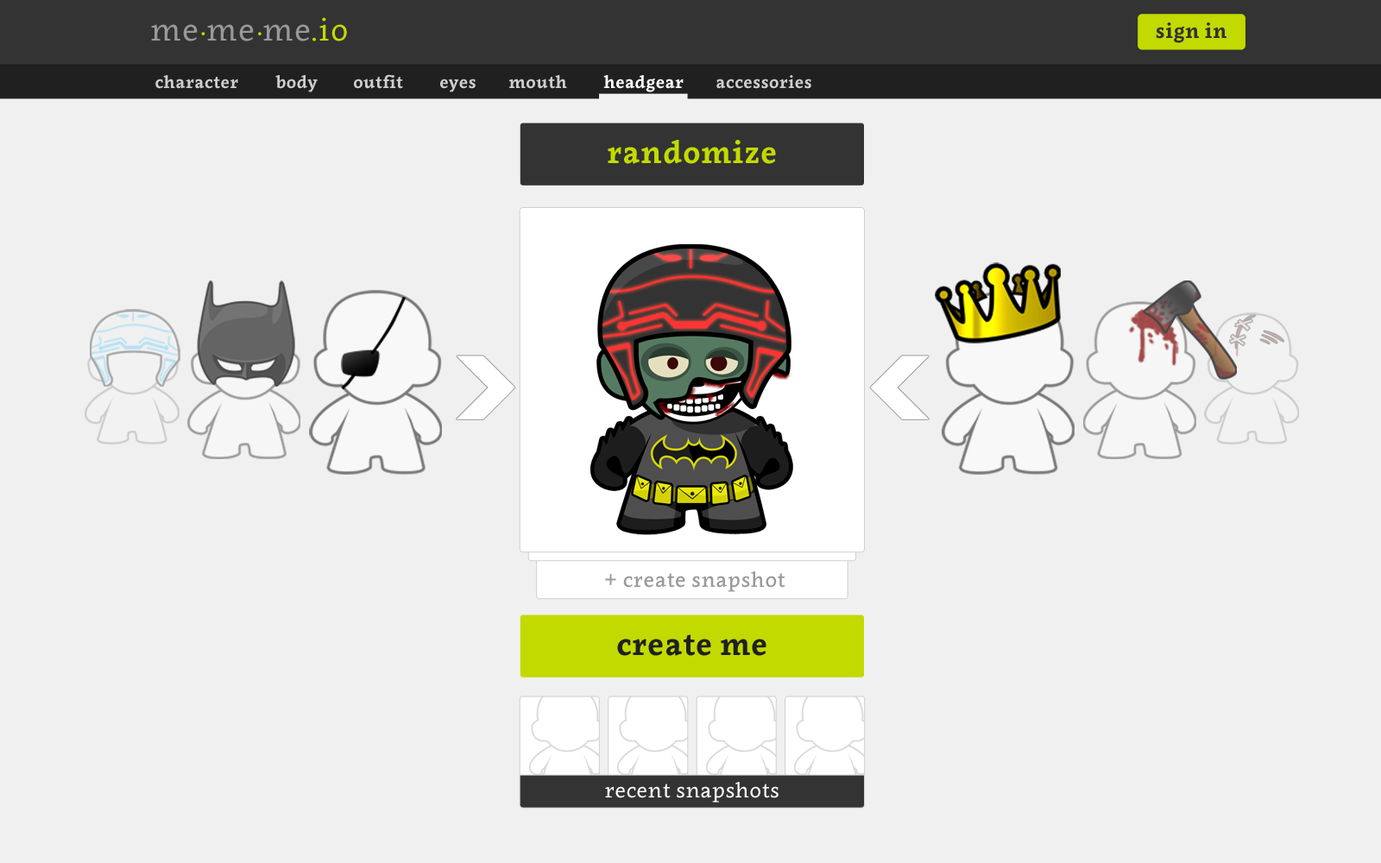
<style>
.page{position:relative;width:1381px;height:863px;background:#f0f0f0}
.page>*{position:absolute;margin:0}
.t1{font:31.1px "Clavo-Regular";letter-spacing:0.02em;color:#999999}
.t2{font:31.1px "Clavo-Regular";letter-spacing:0.02em;color:#c2da00}
.t3{font:20.7px "Clavo-Bold";letter-spacing:0.02em;color:#333333}
.t4{font:17.3px "Clavo-Bold";letter-spacing:0.02em;color:#cfcfcf}
.t5{font:17.3px "Clavo-Bold";letter-spacing:0.02em;color:#ffffff}
.t6{font:31.1px "Clavo-Bold";letter-spacing:0.02em;color:#c2da00}
.t7{font:20.7px "Clavo-Medium";letter-spacing:0.02em;color:#999999}
.t8{font:31.1px "Clavo-Bold";letter-spacing:0.02em;color:#202020}
.t9{font:20.7px "Clavo-Regular";letter-spacing:0.02em;color:#ffffff}
</style>
<div class="page">
<p class="t1" style="left:151px;top:17px;width:196px;height:24px">me me me<span class="t2">.io</span></p>
<p class="t3" style="left:1156px;top:22px;width:71px;height:21px">sign in</p>
<p class="t4" style="left:155px;top:75px;width:83px;height:14px">character</p>
<p class="t4" style="left:275px;top:75px;width:43px;height:17px">body</p>
<p class="t4" style="left:354px;top:74px;width:49px;height:15px">outfit</p>
<p class="t4" style="left:509px;top:75px;width:58px;height:14px">mouth</p>
<p class="t5" style="left:603px;top:75px;width:81px;height:17px">headgear</p>
<p class="t4" style="left:717px;top:75px;width:94px;height:14px">accessories</p>
<p class="t4" style="left:440px;top:79px;width:36px;height:13px">eyes</p>
<p class="t6" style="left:608px;top:140px;width:168px;height:24px">randomize</p>
<p class="t7" style="left:605px;top:571px;width:181px;height:21px">+ create snapshot</p>
<p class="t8" style="left:617px;top:635px;width:150px;height:21px">create me</p>
<p class="t9" style="left:605px;top:782px;width:174px;height:21px">recent snapshots</p>
</div>
